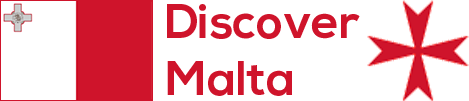
<style>
.page{position:relative;width:469px;height:101px;background:#ffffff}
.page>*{position:absolute;margin:0}
.t1{font:48px "NexaBold";color:#cf142b}
</style>
<div class="page">
<p class="t1" style="left:167px;top:4px;width:193px;height:92px;text-align:right">Discover<br>Malta</p>
</div>
